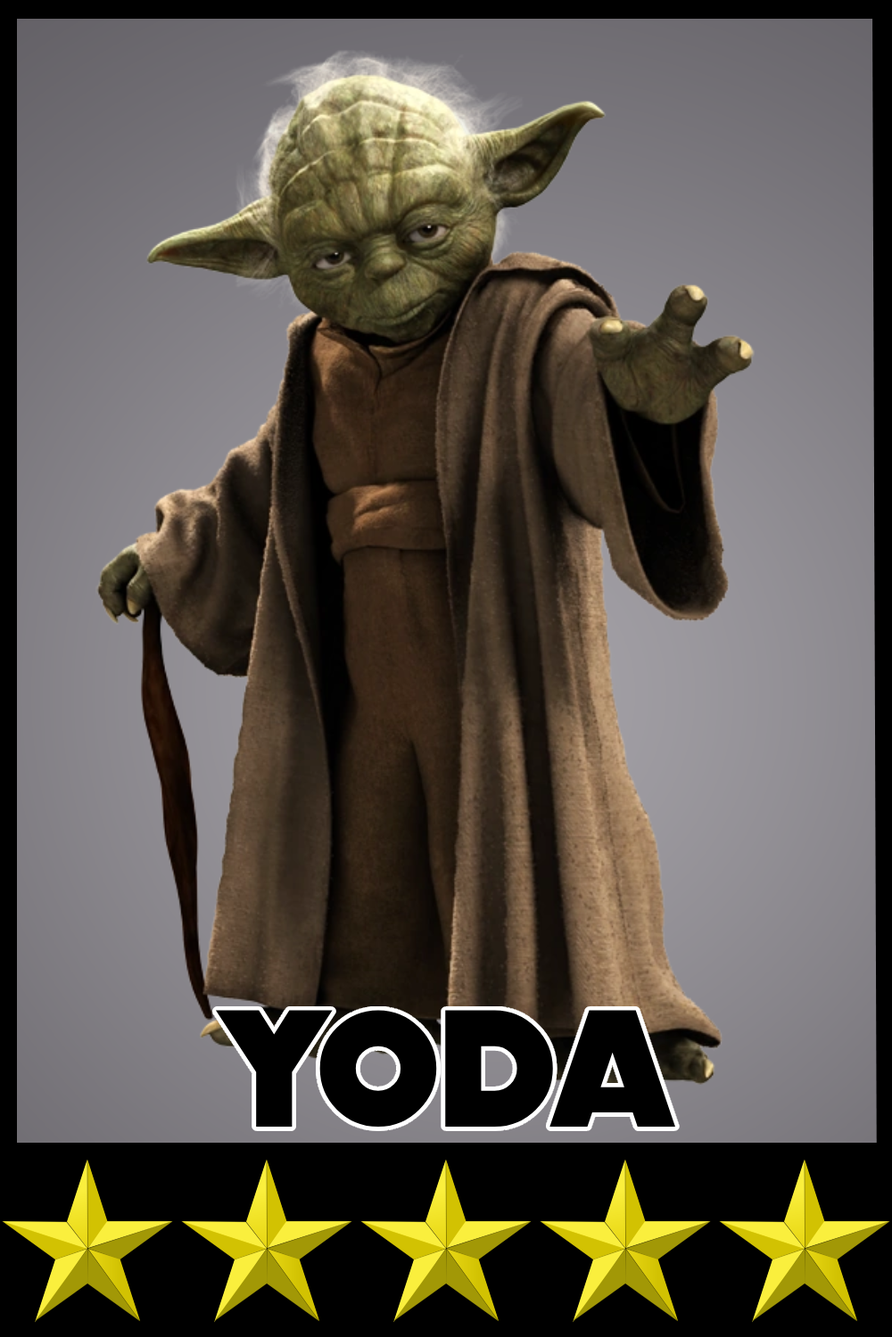
<style>
.page{position:relative;width:892px;height:1337px}
.page>*{position:absolute;margin:0}
.t1{font:179.1px "DistantGalaxy";color:#000000}
</style>
<div class="page">
<p class="t1" style="left:216px;top:1010px;width:459px;height:117px">yoda</p>
</div>
